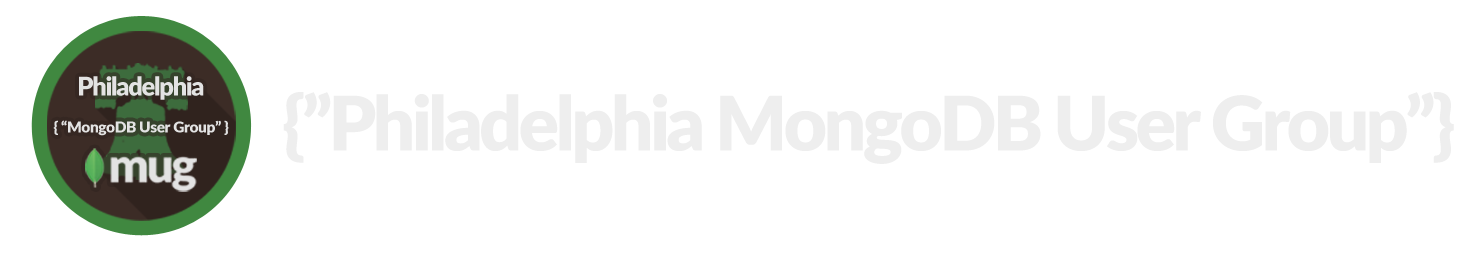
<style>
.page{position:relative;width:1475px;height:258px;background:#ffffff}
.page>*{position:absolute;margin:0}
.t1{font:25.4px "Lato-Black";letter-spacing:-0.05em;color:#e3e3e3}
.t2{font:75.3px "Lato-Black";letter-spacing:-0.05em;color:#eeeeee}
.t3{font:15.1px "Lato-Black";letter-spacing:-0.025em;color:#e3e3e3}
</style>
<div class="page">
<p class="t1" style="left:79px;top:76px;width:125px;height:24px">Philadelphia</p>
<p class="t2" style="left:283px;top:92px;width:1171px;height:72px">{”Philadelphia MongoDB User Group”}</p>
<p class="t3" style="left:53px;top:120px;width:176px;height:16px">{ “MongoDB User Group” }</p>
</div>
